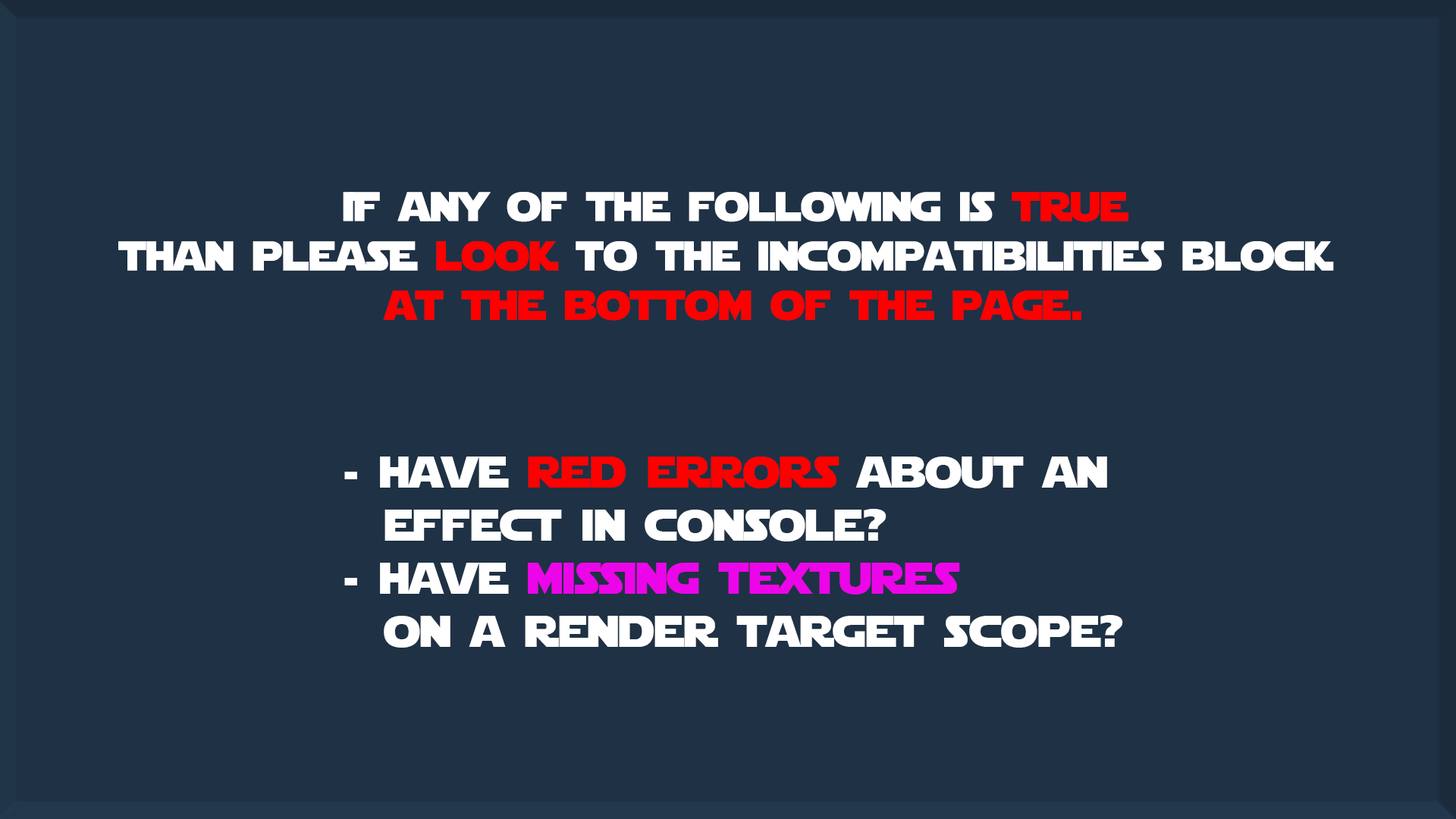
<style>
.page{position:relative;width:1456px;height:819px;background:#1f3144}
.page>*{position:absolute;margin:0}
.t1{font:41.1px "StarJedi";color:#ffffff}
.t2{font:41.1px "StarJedi";color:#ff0000}
.t3{font:44.2px "StarJedi";color:#ffffff}
.t4{font:44.2px "StarJedi";color:#ff0000}
.t5{font:44.2px "StarJedi";color:#ec05e9}
</style>
<div class="page">
<p class="t1" style="left:118px;top:192px;width:1216px;height:129px;text-align:center">iF any of the following is <span class="t2">true<br></span>than please <span class="t2">look</span> to the incompatibilities block <br><span class="t2">at the bottom of the page.</span></p>
<p class="t3" style="left:344px;top:457px;width:779px;height:191px">- have <span class="t4">red errors</span> about an <br>  effect in console?<br>- have <span class="t5">missing textures</span> <br>  on a render target scope?</p>
</div>
